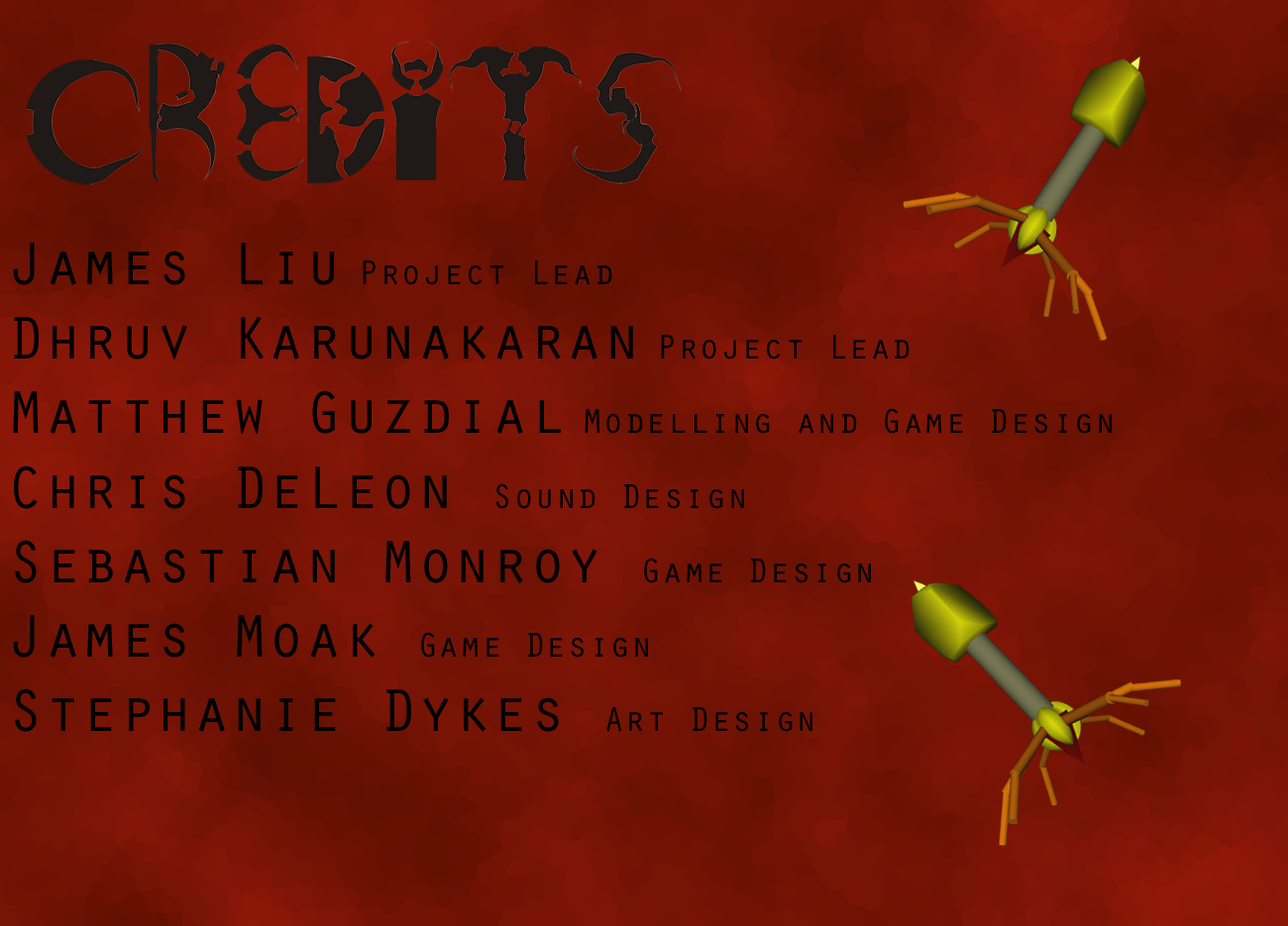
<style>
.page{position:relative;width:1288px;height:926px}
.page>*{position:absolute;margin:0}
.t1{font:35.7px "OratorStd";color:#000000}
.t2{font:62.1px "OratorStd";color:#000000}
</style>
<div class="page">
<p class="t1" style="left:13px;top:243px;width:1098px;height:489px"><span class="t2">James Liu </span>Project Lead<br><span class="t2">Dhruv Karunakaran </span>Project Lead <br><span class="t2">Matthew Guzdial </span>Modelling and Game Design <br><span class="t2">Chris DeLeon </span>Sound Design <br><span class="t2">Sebastian Monroy </span>Game Design<br><span class="t2">James Moak </span>Game Design<br><span class="t2">Stephanie Dykes </span>Art Design</p>
</div>
